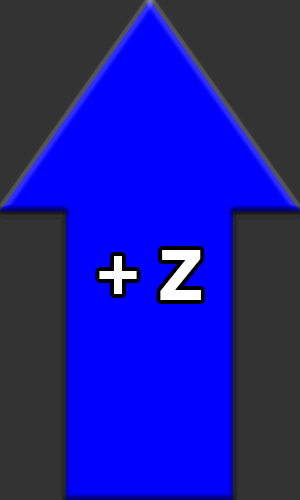
<style>
.page{position:relative;width:300px;height:500px;background:#0000ff}
.page>*{position:absolute;margin:0}
.t1{font:75px "FranklinGothic-Demi";color:#ffffff}
</style>
<div class="page">
<p class="t1" style="left:99px;top:250px;width:102px;height:50px">+ Z</p>
</div>
